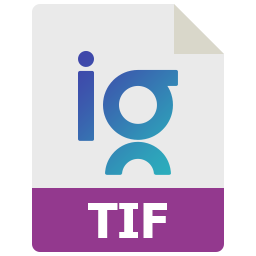
<style>
.page{position:relative;width:256px;height:256px;background:#eaeaea}
.page>*{position:absolute;margin:0}
.t1{font:48px "Tahoma-Bold";color:#ffffff}
</style>
<div class="page">
<p class="t1" style="left:88px;top:203px;width:79px;height:35px">TIF</p>
</div>
